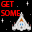
<style>
.page{position:relative;width:32px;height:32px;background:#000000}
.page>*{position:absolute;margin:0}
.t1{font:7.8px "MyriadPro-Regular";color:#f60000}
</style>
<div class="page">
<p class="t1" style="left:1px;top:1px;width:19px;height:16px">GET<br>SOME</p>
</div>
